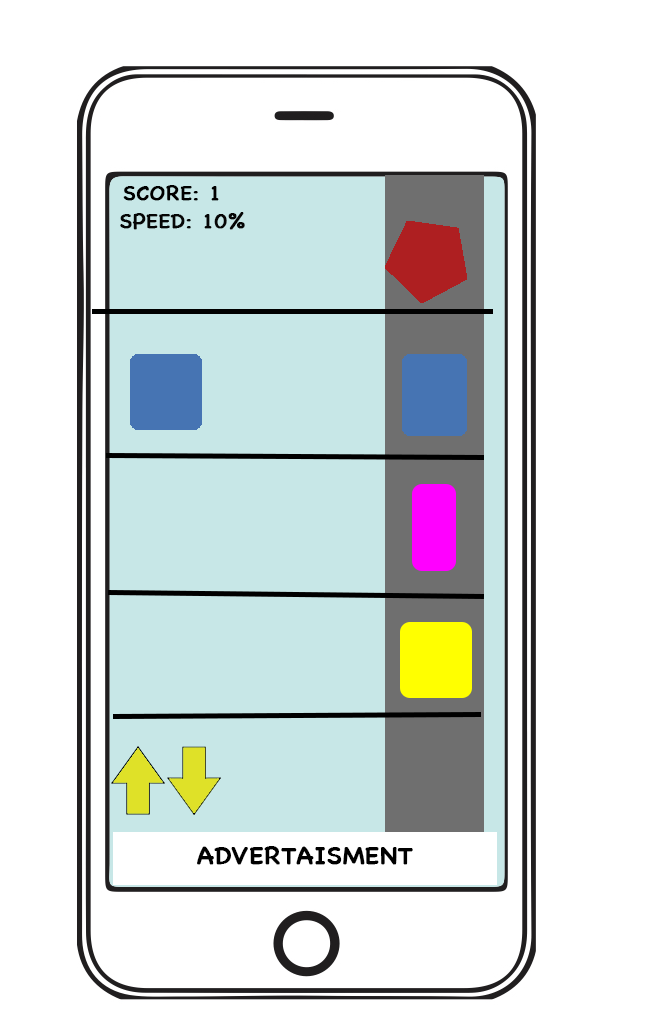
<style>
.page{position:relative;width:671px;height:1030px;background:#ffffff}
.page>*{position:absolute;margin:0}
.t1{font:20.8px "ChalkboardSE-Regular";color:#000000;text-transform:uppercase;font-weight:bold;scale:1.05 1}
.t2{font:20.8px "ChalkboardSE-Regular";color:#060606;text-transform:uppercase;font-weight:bold;scale:1.05 1}
.t3{font:25px "ChalkboardSE-Regular";color:#000000;text-transform:uppercase;font-weight:bold;scale:1.05 1}
</style>
<div class="page">
<p class="t1" style="left:123px;top:185px;width:96px;height:16px">SCORE: 1</p>
<p class="t2" style="left:120px;top:212px;width:125px;height:18px">Speed: 10%</p>
<p class="t3" style="left:197px;top:846px;width:216px;height:19px">AdVERTAISMENT</p>
</div>
